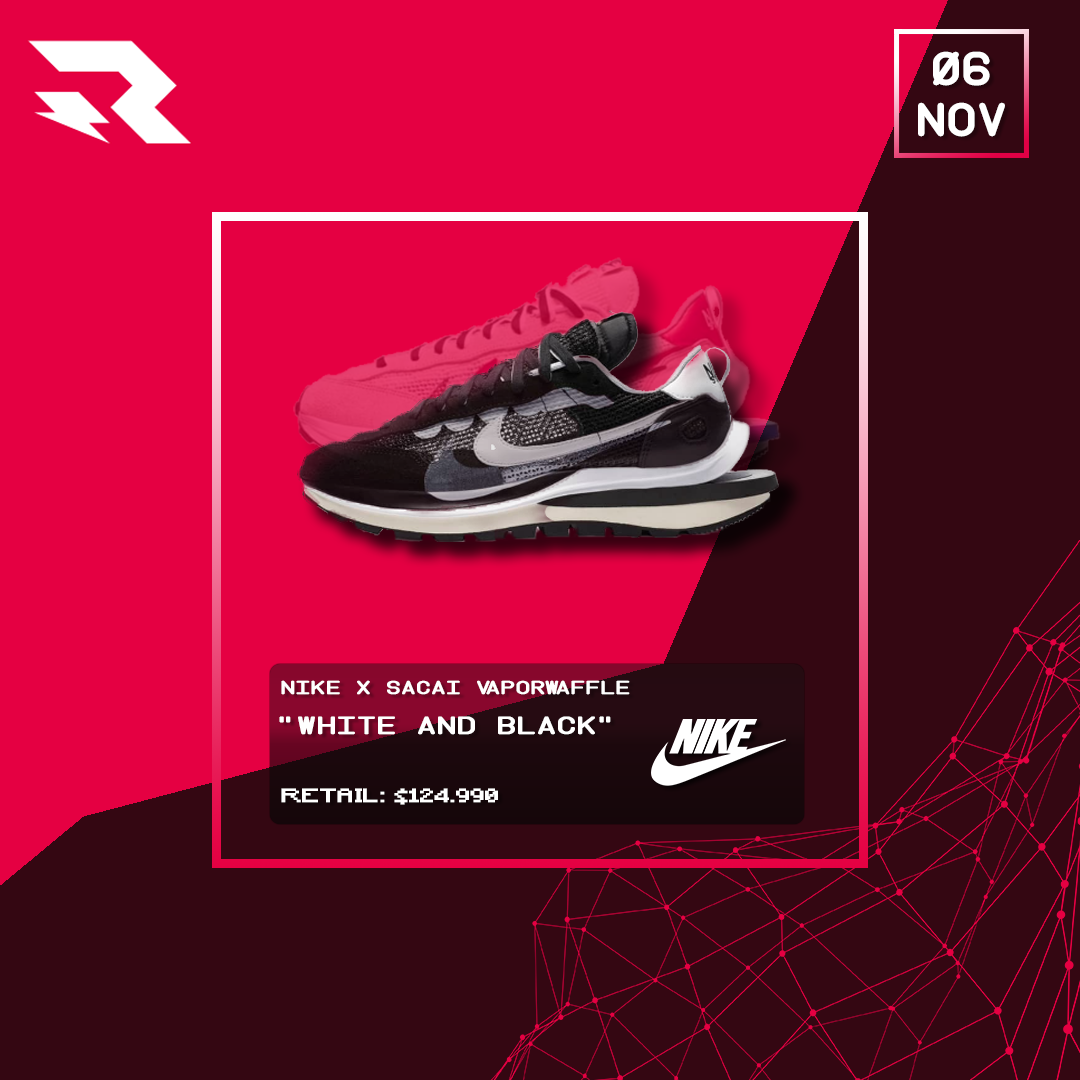
<style>
.page{position:relative;width:1080px;height:1080px;background:#340712}
.page>*{position:absolute;margin:0}
.t1{font:44px "Instruction";color:#ffffff;font-weight:bold;scale:1.13 1}
.t2{font:18px "Instruction";color:#ffffff;font-weight:bold;scale:1.36 1}
.t3{font:24px "Instruction";color:#ffffff;font-weight:bold;scale:1.36 1}
.t4{font:18px "Minecraft";color:#ffffff;font-weight:bold;scale:1.36 1}
</style>
<div class="page">
<p class="t1" style="left:933px;top:51px;width:57px;height:35px">06</p>
<p class="t1" style="left:918px;top:102px;width:87px;height:35px">NOV</p>
<p class="t2" style="left:281px;top:680px;width:349px;height:15px">NIKE X SACAI VAPORWAFFLE</p>
<p class="t3" style="left:279px;top:716px;width:332px;height:19px">“white and black”</p>
<p class="t4" style="left:281px;top:788px;width:217px;height:17px">RETAIL: $124.990</p>
</div>
